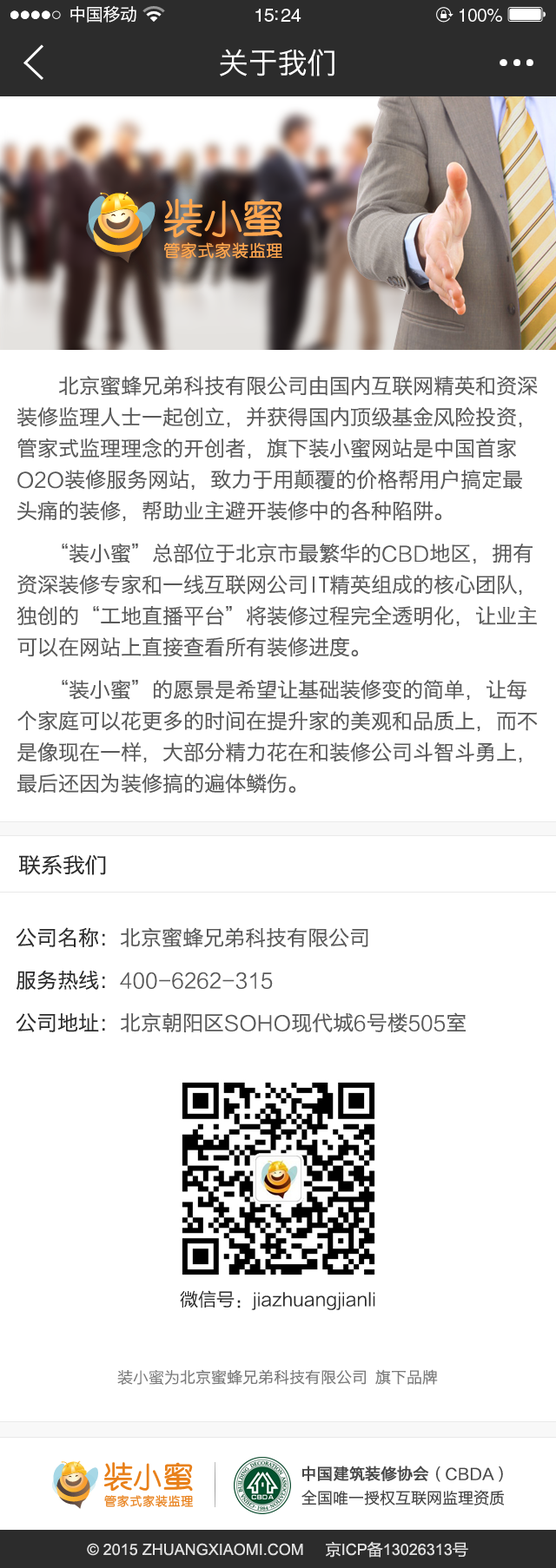
<style>
.page{position:relative;width:556px;height:1568px;background:#ffffff}
.page>*{position:absolute;margin:0}
.t1{font:17.4px "HiraginoSansGB-W3";letter-spacing:-0.02em;color:#ffffff}
.t2{font:18.7px "HelveticaLTStd-Roman";letter-spacing:-0.02em;color:#ffffff}
.t3{font:17.9px "HelveticaLTStd-Roman";letter-spacing:-0.02em;color:#ffffff}
.t4{font:20.8px/31.3px "HiraginoSansGB-W3";color:#595959}
.t5{font:20.8px/31.3px "FZLTXHK";color:#595959}
.t6{font:21.3px "HiraginoSansGB-W3";letter-spacing:-0.02em;color:#2c2c2c;scale:1.06 1}
.t7{font:20.8px/31.3px "HiraginoSansGB-W3";color:#2c2c2c}
.t8{font:18.2px "FZLTXHK";color:#2c2c2c}
.t9{font:15.6px "HiraginoSansGB-W3";color:#7a7a7a}
.t10{font:15.6px "FZLTXHK";color:#7a7a7a}
.t11{font:15.6px "HiraginoSansGB-W3";color:#464646;font-weight:bold}
.t12{font:15.6px "FZLTXHK";color:#464646;font-weight:bold}
.t13{font:15.6px "HiraginoSansGB-W3";color:#464646}
.t14{font:15.6px "ArialMT";color:#e2e2e2}
.t15{font:15.6px "MicrosoftYaHei";color:#e2e2e2}
</style>
<div class="page">
<p class="t1" style="left:70px;top:6px;width:66px;height:17px">中国移动</p>
<p class="t2" style="left:255px;top:9px;width:46px;height:13px">15:24</p>
<p class="t3" style="left:459px;top:9px;width:43px;height:13px">100%</p>
<p class="t4" style="left:16px;top:376px;width:521px;height:418px">北京蜜蜂兄弟科技有限公司由国内互联网精英和资深装修监理人士一起创立，并获得国内顶级基金风险投资，管家式监理理念的开创者，旗下装小蜜网站是中国首家<span class="t5">O2O</span>装修服务网站，致力于用颠覆的价格帮用户搞定最头痛的装修，帮助业主避开装修中的各种陷阱。<br>   “装小蜜”总部位于北京市最繁华的<span class="t5">CBD</span>地区，拥有资深装修专家和一线互联网公司IT精英组成的核心团队，独创的“工地直播平台”将装修过程完全透明化，让业主可以在网站上直接查看所有装修进度。<br>   “装小蜜”的愿景是希望让基础装修变的简单，让每个家庭可以花更多的时间在提升家的美观和品质上，而不是像现在一样，大部分精力花在和装修公司斗智斗勇上，最后还因为装修搞的遍体鳞伤。</p>
<p class="t6" style="left:19px;top:854px;width:87px;height:21px">联系我们</p>
<p class="t4" style="left:16px;top:927px;width:449px;height:105px"><span class="t7">公司名称：</span>北京蜜蜂兄弟科技有限公司<br><span class="t7">服务热线：</span><span class="t5">400-6262-315<br></span><span class="t7">公司地址：</span>北京朝阳区<span class="t5">SOHO</span>现代城<span class="t5">6</span>号楼<span class="t5">505</span>室</p>
<p class="t8" style="left:180px;top:1290px;width:195px;height:20px">微信号：jiazhuangjianli</p>
<p class="t9" style="left:117px;top:1369px;width:321px;height:16px"><span class="t10">装小蜜为</span>北京蜜蜂兄弟科技有限公司 旗下品牌</p>
<p class="t11" style="left:301px;top:1466px;width:202px;height:16px">中国建筑装修协会<span class="t12">（CBDA）</span></p>
<p class="t13" style="left:301px;top:1490px;width:203px;height:15px">全国唯一授权互联网监理资质</p>
<p class="t14" style="left:87px;top:1541px;width:381px;height:17px">© 2015 ZHUANGXIAOMI.COM     <span class="t15">京</span>ICP<span class="t15">备</span>13026313<span class="t15">号</span></p>
</div>
